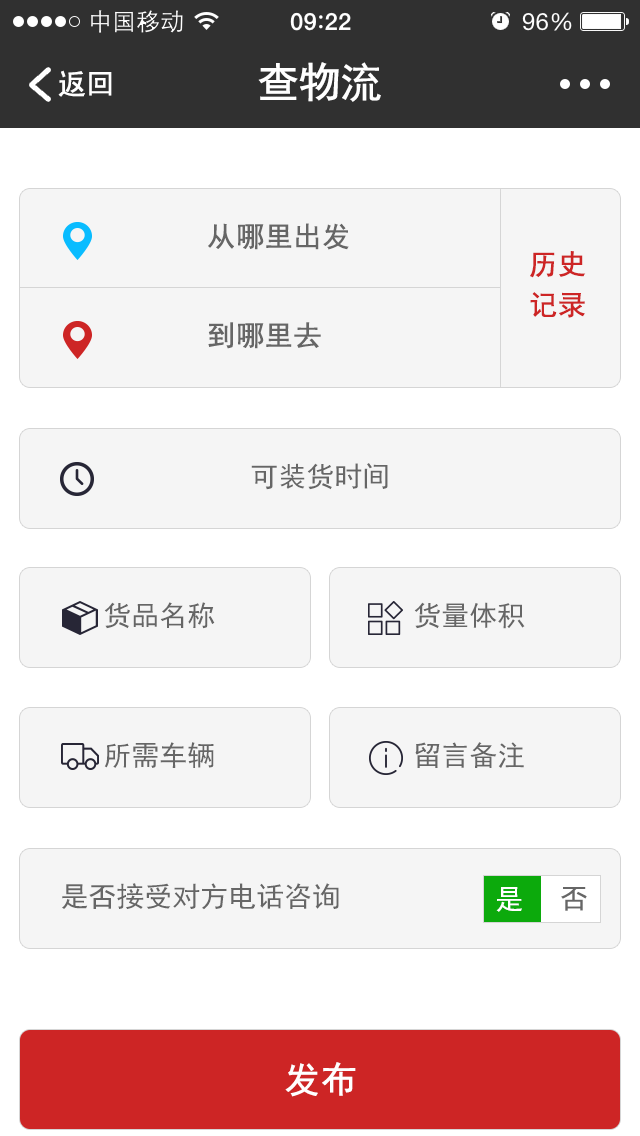
<style>
.page{position:relative;width:640px;height:1136px;background:#f5f5f5}
.page>*{position:absolute;margin:0}
.t1{font:42px "SimHei";letter-spacing:-0.04em;color:#ffffff;font-weight:bold}
.t2{font:28px "SimHei";color:#ffffff;font-weight:bold}
.t3{font:28px "SimHei";color:#666666;font-weight:bold}
.t4{font:28px/40.3px "SimHei";color:#cd2525;font-weight:bold}
.t5{font:28px "SimHei";color:#666666}
.t6{font:28px "SimHei";color:#ffffff}
.t7{font:36px "SimHei";color:#ffffff;font-weight:bold}
</style>
<div class="page">
<p class="t1" style="left:258px;top:62px;width:123px;height:40px">查物流</p>
<p class="t2" style="left:58px;top:70px;width:54px;height:27px">返回</p>
<p class="t3" style="left:208px;top:223px;width:141px;height:27px">从哪里出发</p>
<p class="t4" style="left:530px;top:251px;width:56px;height:67px">历史<br>记录</p>
<p class="t3" style="left:208px;top:322px;width:113px;height:27px">到哪里去</p>
<p class="t5" style="left:251px;top:463px;width:137px;height:27px">可装货时间</p>
<p class="t5" style="left:104px;top:602px;width:111px;height:27px">货品名称</p>
<p class="t5" style="left:414px;top:602px;width:111px;height:27px">货量体积</p>
<p class="t5" style="left:104px;top:742px;width:110px;height:26px">所需车辆</p>
<p class="t5" style="left:415px;top:742px;width:109px;height:26px">留言备注</p>
<p class="t5" style="left:62px;top:883px;width:277px;height:27px">是否接受对方电话咨询</p>
<p class="t6" style="left:496px;top:887px;width:26px;height:25px">是</p>
<p class="t5" style="left:561px;top:887px;width:26px;height:24px">否</p>
<p class="t7" style="left:285px;top:1062px;width:71px;height:35px">发布</p>
</div>
